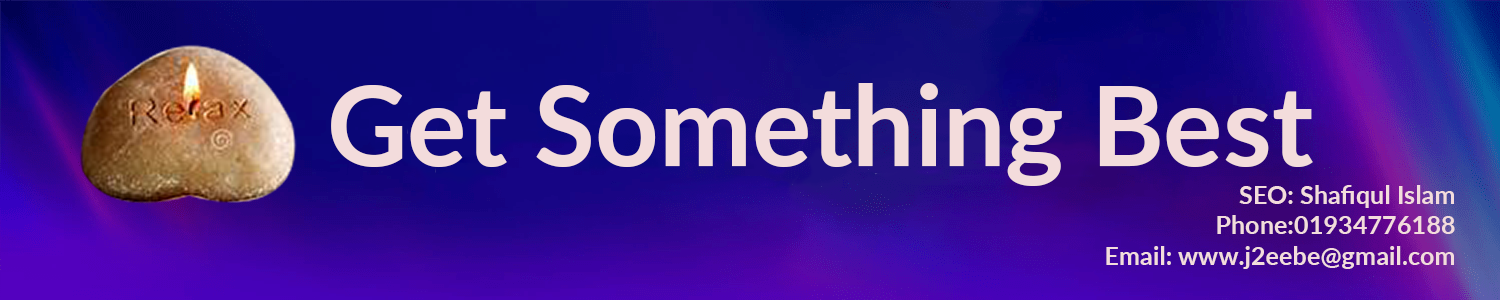
<style>
.page{position:relative;width:1500px;height:300px}
.page>*{position:absolute;margin:0}
.t1{font:111.1px "Lato-Bold";color:#f3dcdc}
.t2{font:25.3px "Lato-Bold";color:#f3dcdc}
</style>
<div class="page">
<p class="t1" style="left:331px;top:83px;width:982px;height:103px">Get Something Best</p>
<p class="t2" style="left:1106px;top:185px;width:349px;height:84px;text-align:right">SEO: Shafiqul Islam<br>Phone:01934776188<br>Email: www.j2eebe@gmail.com</p>
</div>
